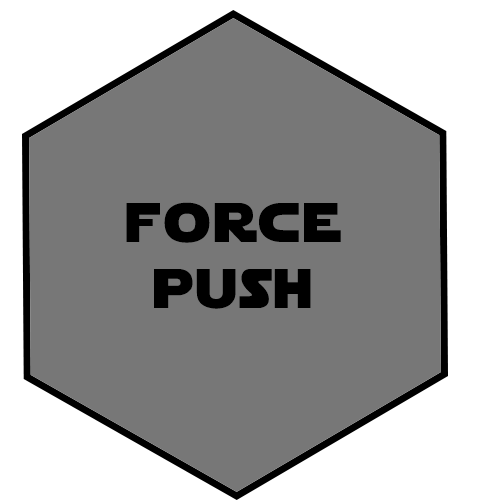
<style>
.page{position:relative;width:500px;height:500px;background:#777777}
.page>*{position:absolute;margin:0}
.t1{font:55px "StarJedi";letter-spacing:0.07em;color:#000000}
</style>
<div class="page">
<p class="t1" style="left:126px;top:202px;width:215px;height:107px;text-align:center">force<br>push</p>
</div>
